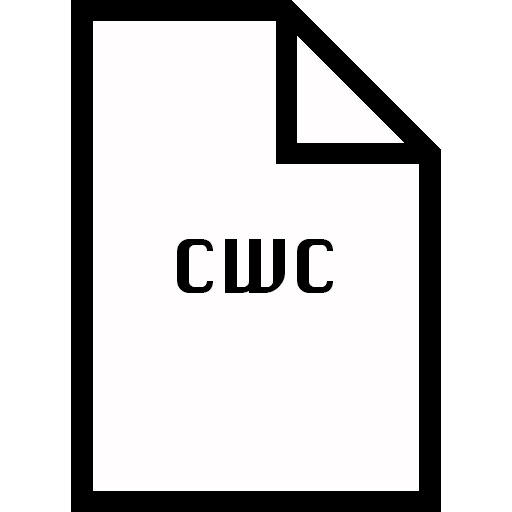
<style>
.page{position:relative;width:512px;height:512px;background:#fffdfd}
.page>*{position:absolute;margin:0}
.t1{font:72px "Chicago";color:#000000}
</style>
<div class="page">
<p class="t1" style="left:177px;top:239px;width:156px;height:54px">CWC</p>
</div>
